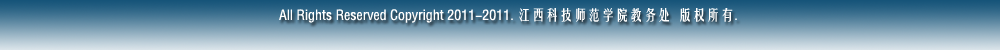
<style>
.page{position:relative;width:1000px;height:50px}
.page>*{position:absolute;margin:0}
.t1{font:14px "FZYTJW--GB1-0";color:#ffffff}
</style>
<div class="page">
<p class="t1" style="left:279px;top:8px;width:458px;height:15px">All Rights Reserved Copyright 2011-2011. 江西科技师范学院教务处  版权所有.</p>
</div>
